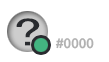
<style>
.page{position:relative;width:109px;height:62px;background:#ffffff}
.page>*{position:absolute;margin:0}
.t1{font:40.3px "MS-PGothic";color:#292b2f;scale:1.51 1}
.t2{font:14.8px "Vrinda-Bold";color:#b2b2b2}
</style>
<div class="page">
<p class="t1" style="left:16px;top:18px;width:24px;height:28px">?</p>
<p class="t2" style="left:55px;top:38px;width:39px;height:11px">#0000</p>
</div>
